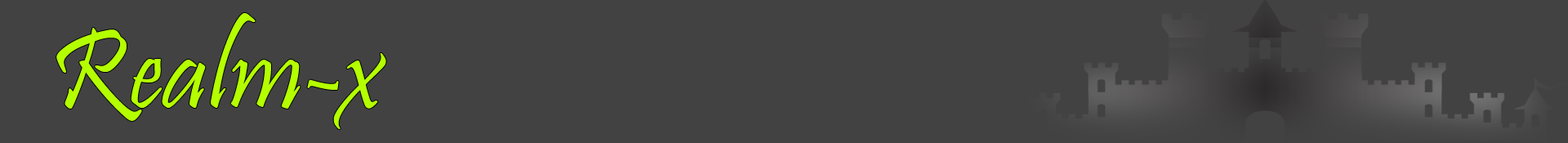
<style>
.page{position:relative;width:1568px;height:143px;background:#424242}
.page>*{position:absolute;margin:0}
.t1{font:114.3px "Pristina-Regular";color:#b4ff00}
</style>
<div class="page">
<p class="t1" style="left:56px;top:13px;width:330px;height:116px">Realm-x</p>
</div>
